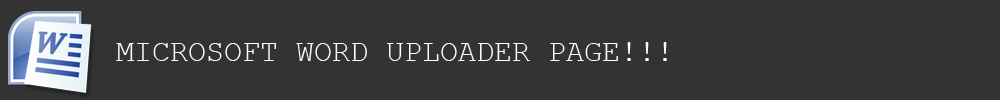
<style>
.page{position:relative;width:1000px;height:100px;background:#333333}
.page>*{position:absolute;margin:0}
.t1{font:30px "CourierNewPSMT";color:#fcfcfc}
</style>
<div class="page">
<p class="t1" style="left:116px;top:42px;width:551px;height:19px">MICROSOFT WORD UPLOADER PAGE!!!</p>
</div>
